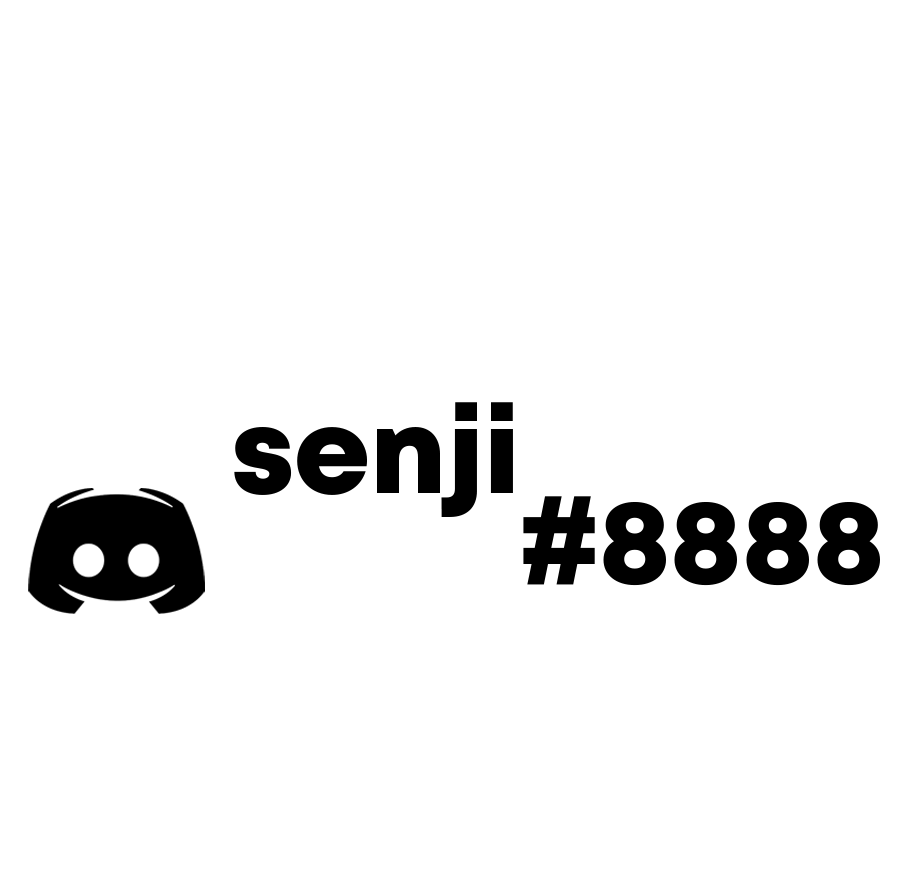
<style>
.page{position:relative;width:908px;height:874px;background:#ffffff}
.page>*{position:absolute;margin:0}
.t1{font:118.7px "Mont-HeavyDEMO";color:#000000}
.t2{font:118.7px "Arial-Black";color:#000000}
</style>
<div class="page">
<p class="t1" style="left:234px;top:402px;width:279px;height:115px">senji</p>
<p class="t1" style="left:523px;top:496px;width:357px;height:90px"><span class="t2">#</span>8888</p>
</div>
